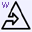
<style>
.page{position:relative;width:32px;height:32px;background:#f0f0ff}
.page>*{position:absolute;margin:0}
.t1{font:9px "MyriadPro-Regular";color:#835dbc}
</style>
<div class="page">
<p class="t1" style="left:2px;top:2px;width:7px;height:6px">W</p>
</div>
